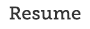
<style>
.page{position:relative;width:90px;height:29px;background:#ffffff}
.page>*{position:absolute;margin:0}
.t1{font:18px "MuseoSlab-500";letter-spacing:0.015em;color:#333333}
</style>
<div class="page">
<p class="t1" style="left:9px;top:6px;width:72px;height:14px">Resume</p>
</div>
